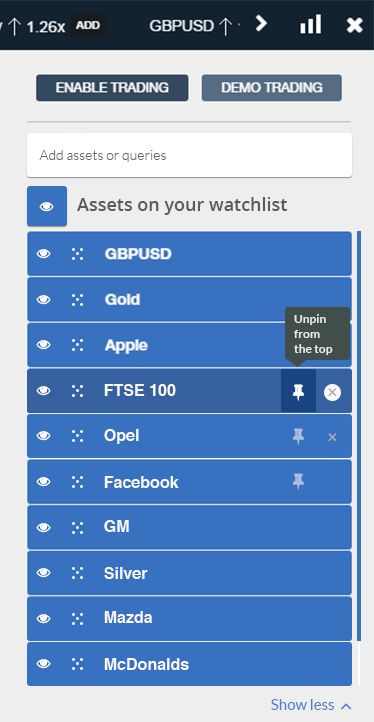
<style>
.page{position:relative;width:374px;height:722px;background:#3971c1}
.page>*{position:absolute;margin:0}
.t1{font:14px "Lato-Light";color:#676767}
.t2{font:18px "OpenSans-Semibold";color:#5b5b5b}
.t3{font:12px/15px "Lato-Bold";color:#e8e9e9}
.t4{font:16px "Helvetica-Bold";color:#fafafa}
.t5{font:21px "Lato-Regular";color:#aeadad}
.t6{font:15px "Lato-Regular";color:#4c7fcb}
</style>
<div class="page">
<p class="t1" style="left:39px;top:150px;width:127px;height:12px">Add assets or queries</p>
<p class="t2" style="left:77px;top:197px;width:210px;height:18px">Assets on your watchlist</p>
<p class="t3" style="left:294px;top:314px;width:39px;height:41px;text-align:right">Unpin from <br>the top</p>
<p class="t4" style="left:104px;top:384px;width:72px;height:12px">FTSE 100</p>
<p class="t5" style="left:328px;top:388px;width:9px;height:9px;rotate:45deg">+</p>
<p class="t4" style="left:104px;top:429px;width:35px;height:15px">Opel</p>
<p class="t5" style="left:328px;top:433px;width:9px;height:9px;rotate:45deg">+</p>
<p class="t4" style="left:104px;top:476px;width:75px;height:12px">Facebook</p>
<p class="t4" style="left:104px;top:520px;width:25px;height:12px">GM</p>
<p class="t4" style="left:104px;top:567px;width:44px;height:12px">Silver</p>
<p class="t4" style="left:104px;top:611px;width:49px;height:12px">Mazda</p>
<p class="t4" style="left:104px;top:658px;width:85px;height:12px">McDonalds</p>
<p class="t6" style="left:271px;top:699px;width:63px;height:11px">Show less</p>
</div>
